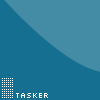
<style>
.page{position:relative;width:100px;height:100px;background:#156f90}
.page>*{position:absolute;margin:0}
.t1{font:9px "Silkscreen";color:#ffffff}
</style>
<div class="page">
<p class="t1" style="left:16px;top:93px;width:32px;height:5px">Tasker</p>
</div>
